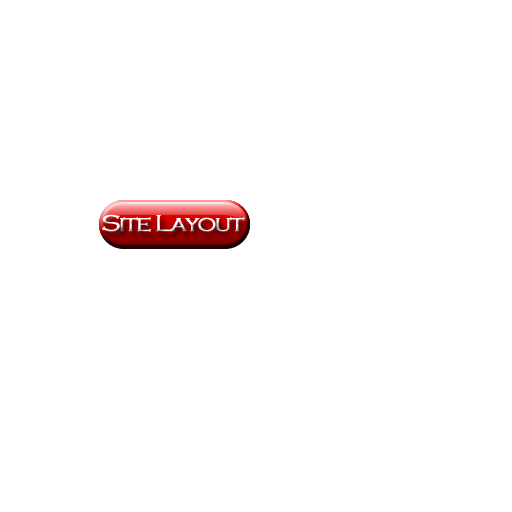
<style>
.page{position:relative;width:512px;height:512px;background:#ffffff}
.page>*{position:absolute;margin:0}
.t1{font:24px "CopperplateGothic-Light";letter-spacing:-0.08em;color:#ffffff;font-weight:bold;scale:1.05 1}
</style>
<div class="page">
<p class="t1" style="left:102px;top:214px;width:143px;height:18px">Site Layout</p>
</div>
